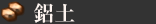
<style>
.page{position:relative;width:156px;height:24px;background:#333333}
.page>*{position:absolute;margin:0}
.t1{font:21px "RyuminPr6N-ExBold";color:#fdf4ef}
</style>
<div class="page">
<p class="t1" style="left:34px;top:3px;width:41px;height:20px">鋁土</p>
</div>
